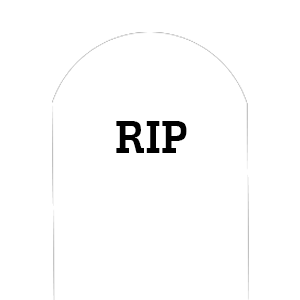
<style>
.page{position:relative;width:300px;height:300px;background:#ffffff}
.page>*{position:absolute;margin:0}
.t1{font:73px "DilleniaUPCBold";color:#000000}
</style>
<div class="page">
<p class="t1" style="left:116px;top:121px;width:71px;height:32px">RIP</p>
</div>
